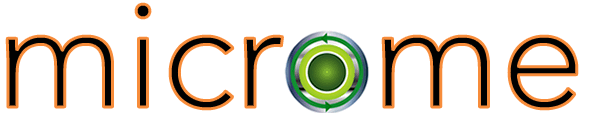
<style>
.page{position:relative;width:596px;height:113px;background:#ffffff}
.page>*{position:absolute;margin:0}
.t1{font:149px "Avenir-Light";letter-spacing:0.001em}
</style>
<div class="page">
<p class="t1" style="left:7px;top:4px;width:570px;height:105px">microme</p>
</div>
